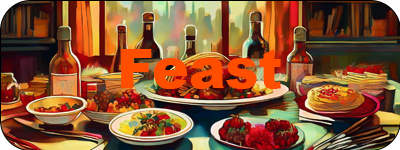
<style>
.page{position:relative;width:400px;height:150px}
.page>*{position:absolute;margin:0}
.t1{font:54.7px "Arial-Black";color:#ff4e00}
</style>
<div class="page">
<p class="t1" style="left:121px;top:49px;width:160px;height:40px">Feast</p>
</div>
